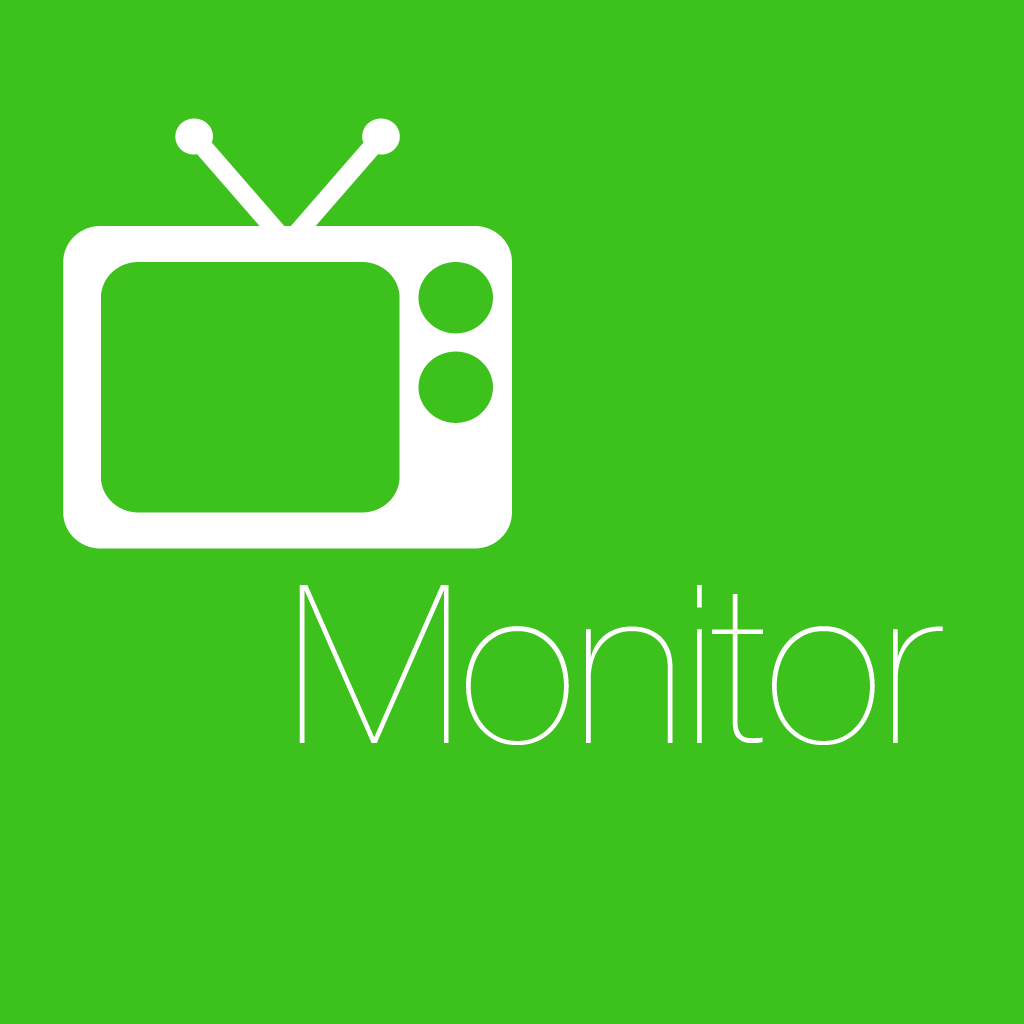
<style>
.page{position:relative;width:1024px;height:1024px;background:#3dc11d}
.page>*{position:absolute;margin:0}
.t1{font:220.7px "HelveticaNeue-UltraLight";color:#ffffff}
</style>
<div class="page">
<p class="t1" style="left:299px;top:585px;width:644px;height:160px">Monitor</p>
</div>
